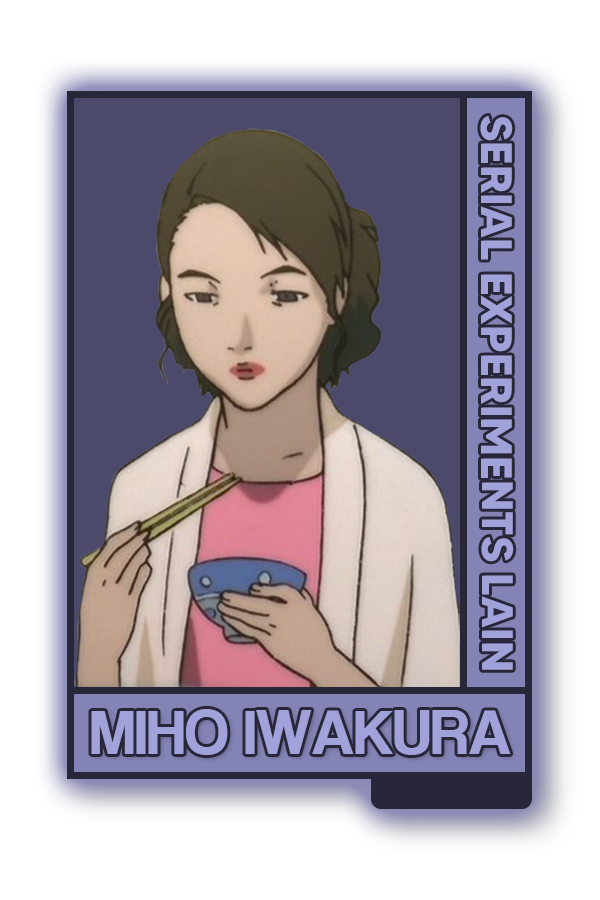
<style>
.page{position:relative;width:600px;height:900px;background:#ffffff}
.page>*{position:absolute;margin:0}
.t1{font:43.8px "MADETOMMY-Bold";color:#a2a2da}
.t2{font:65px "CoolveticaRg-Regular";color:#a2a2da}
</style>
<div class="page">
<p class="t1" style="left:480px;top:115px;width:34px;height:555px;rotate:90deg">SERIAL EXPERIMENTS LAIN</p>
<p class="t2" style="left:91px;top:709px;width:420px;height:46px">MIHO IWAKURA</p>
</div>
